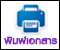
<style>
.page{position:relative;width:60px;height:50px;background:#ffffff}
.page>*{position:absolute;margin:0}
.t1{font:14px "PSLxKittithada-Bold";color:#7a25c3;font-weight:bold}
</style>
<div class="page">
<p class="t1" style="left:4px;top:36px;width:53px;height:9px">พิมพ์เอกสาร</p>
</div>
